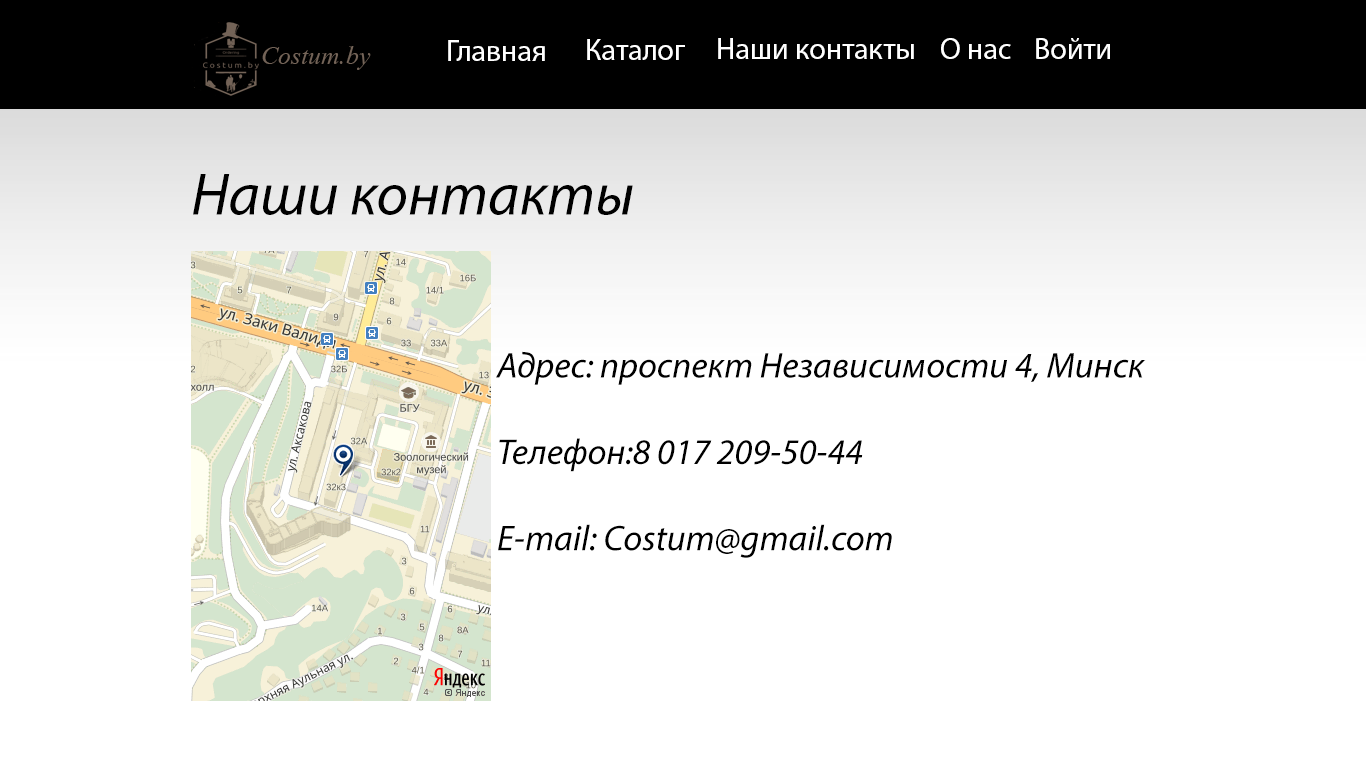
<style>
.page{position:relative;width:1366px;height:768px;background:#ffffff}
.page>*{position:absolute;margin:0}
.t1{font:30px "MyriadPro-Regular";color:#ffffff}
.t2{font:60px "MyriadPro-It";color:#000000}
.t3{font:36px "MyriadPro-It";color:#000000}
</style>
<div class="page">
<p class="t1" style="left:448px;top:40px;width:97px;height:21px">Главная</p>
<p class="t1" style="left:587px;top:39px;width:98px;height:21px">Каталог</p>
<p class="t1" style="left:718px;top:38px;width:196px;height:21px">Наши контакты</p>
<p class="t1" style="left:941px;top:38px;width:70px;height:21px">О нас</p>
<p class="t1" style="left:1036px;top:38px;width:74px;height:21px">Войти</p>
<p class="t2" style="left:193px;top:174px;width:440px;height:41px">Наши контакты</p>
<p class="t3" style="left:496px;top:351px;width:650px;height:207px">Адрес: проспект Независимости 4, Минск<br><br>Телефон:8 017 209-50-44<br><br>E-mail: Costum@gmail.com</p>
</div>
